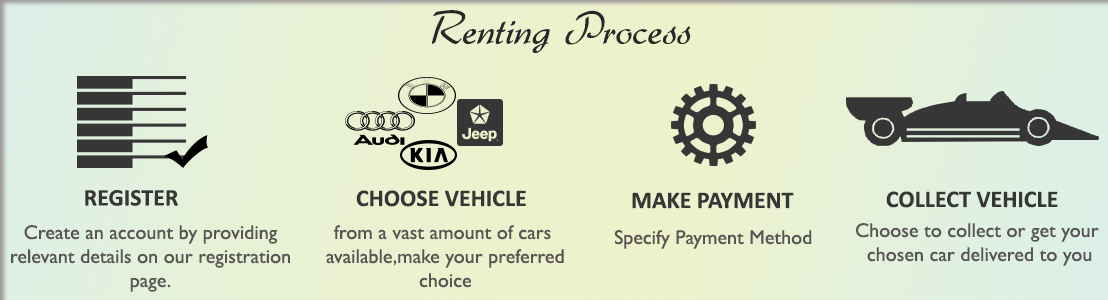
<style>
.page{position:relative;width:1108px;height:300px}
.page>*{position:absolute;margin:0}
.t1{font:48px "Gabrielle";color:#292828}
.t2{font:24px "Calibri-Bold";color:#363636}
.t3{font:20px "GillSansMT";color:#595555}
</style>
<div class="page">
<p class="t1" style="left:432px;top:10px;width:259px;height:43px">Renting Process</p>
<p class="t2" style="left:85px;top:190px;width:93px;height:16px">REGISTER</p>
<p class="t2" style="left:356px;top:190px;width:170px;height:17px">CHOOSE VEHICLE</p>
<p class="t2" style="left:632px;top:192px;width:162px;height:17px">MAKE PAYMENT</p>
<p class="t2" style="left:886px;top:191px;width:172px;height:17px">COLLECT VEHICLE</p>
<p class="t3" style="left:11px;top:225px;width:279px;height:67px;text-align:center">Create an account by providing<br>relevant details on our registration<br>page.</p>
<p class="t3" style="left:326px;top:225px;width:238px;height:63px;text-align:center">from a vast amount of cars <br>available,make your preferred<br>choice</p>
<p class="t3" style="left:614px;top:230px;width:198px;height:19px">Specify Payment Method</p>
<p class="t3" style="left:856px;top:223px;width:243px;height:43px;text-align:center">Choose to collect or get your <br>chosen car delivered to you</p>
</div>
